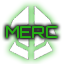
<style>
.page{position:relative;width:64px;height:64px;background:#ffffff}
.page>*{position:absolute;margin:0}
.t1{font:16px "Orbitron-Medium";color:#25b113}
</style>
<div class="page">
<p class="t1" style="left:6px;top:26px;width:52px;height:12px">MERC</p>
</div>
